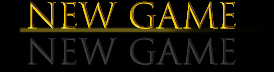
<style>
.page{position:relative;width:274px;height:72px;background:#000000}
.page>*{position:absolute;margin:0}
.t1{font:34px "TrajanColor-Concept"}
.t2{font:34px "TrajanColor-Concept";color:#303030}
</style>
<div class="page">
<p class="t1" style="left:28px;top:1px;width:208px;height:28px">New Game</p>
<p class="t2" style="left:28px;top:37px;width:208px;height:28px">NEW GAME</p>
</div>
